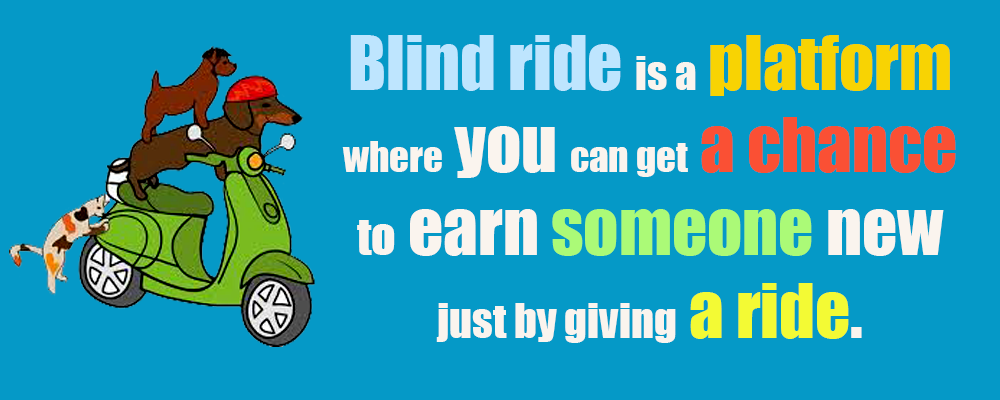
<style>
.page{position:relative;width:1000px;height:400px;background:#0599c7}
.page>*{position:absolute;margin:0}
.t1{font:44px "Impact";color:#faf4ee}
.t2{font:69px "Impact";color:#bee5fe}
.t3{font:43px "Impact";color:#faf4ee}
.t4{font:69px "Impact";color:#f8d303}
.t5{font:39px "Impact";color:#faf4ee}
.t6{font:69px "Impact";color:#faf4ee}
.t7{font:69px "Impact";color:#fa5034}
.t8{font:48px "Impact";color:#faf4ee}
.t9{font:69px "Impact";color:#abfa77}
.t10{font:69px "Impact";color:#f3fa34}
</style>
<div class="page">
<p class="t1" style="left:342px;top:35px;width:614px;height:308px;text-align:center"><span class="t2">Blind ride </span><span class="t3">is a </span><span class="t4">platform </span><span class="t5">where</span><span class="t6"> you </span><span class="t5">can get </span><span class="t7">a chance </span><span class="t8">to</span><span class="t6"> earn </span><span class="t9">someone</span><span class="t6"> new </span>just by giving<span class="t10"> a ride</span><span class="t6">.</span></p>
</div>
